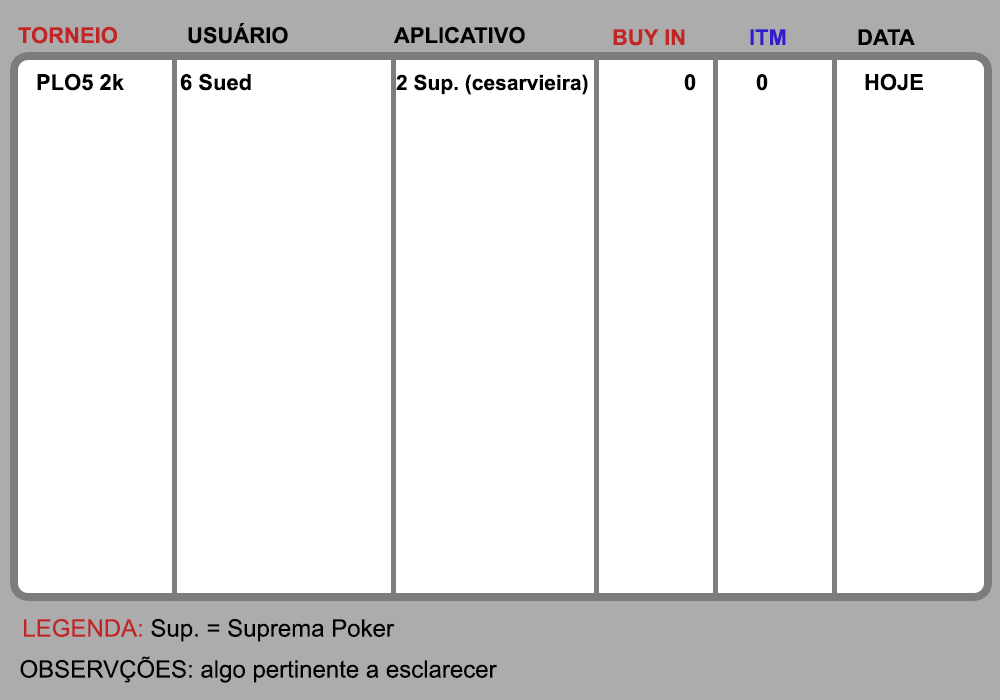
<style>
.page{position:relative;width:1000px;height:700px;background:#ffffff}
.page>*{position:absolute;margin:0}
.t1{font:22px "Arial-BoldMT";color:#c02626}
.t2{font:22px "Arial-BoldMT";color:#000000}
.t3{font:22px "Arial-BoldMT";color:#321dcb}
.t4{font:21px "Arial-BoldMT";color:#000000}
.t5{font:24px "ArialMT";color:#000000}
.t6{font:24px "ArialMT";color:#c02626}
</style>
<div class="page">
<p class="t1" style="left:18px;top:26px;width:99px;height:18px">TORNEIO</p>
<p class="t2" style="left:188px;top:23px;width:100px;height:21px">USUÁRIO</p>
<p class="t2" style="left:394px;top:26px;width:131px;height:18px">APLICATIVO</p>
<p class="t1" style="left:613px;top:29px;width:72px;height:17px">BUY IN</p>
<p class="t3" style="left:750px;top:29px;width:36px;height:16px">ITM</p>
<p class="t2" style="left:858px;top:29px;width:57px;height:16px">DATA</p>
<p class="t4" style="left:37px;top:73px;width:886px;height:22px"><span class="t2">PLO5 2k  6 Sued     </span>2 Sup. (cesarvieira)<span class="t2">   0  0   HOJE</span></p>
<p class="t5" style="left:24px;top:619px;width:371px;height:23px"><span class="t6">LEGENDA:</span> Sup. = Suprema Poker</p>
<p class="t5" style="left:20px;top:656px;width:477px;height:27px">OBSERVÇÕES: algo pertinente a esclarecer</p>
</div>
